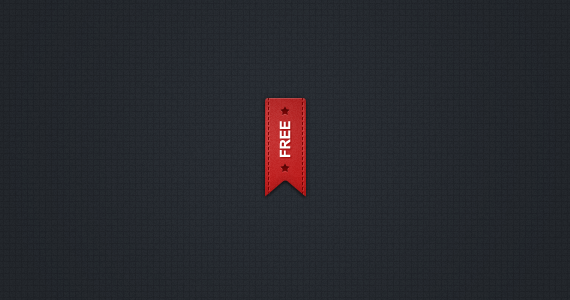
<style>
.page{position:relative;width:570px;height:300px}
.page>*{position:absolute;margin:0}
.t1{font:14px "Arial-BoldMT";color:#ffffff;text-transform:uppercase}
</style>
<div class="page">
<p class="t1" style="left:279px;top:121px;width:12px;height:36px;rotate:-90deg">free</p>
</div>
